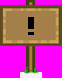
<style>
.page{position:relative;width:62px;height:78px;background:#ff00ff}
.page>*{position:absolute;margin:0}
.t1{font:24px "M04_FATAL-FURY-BLACK";letter-spacing:-0.075em;color:#000000}
</style>
<div class="page">
<p class="t1" style="left:28px;top:17px;width:6px;height:18px">!</p>
</div>
